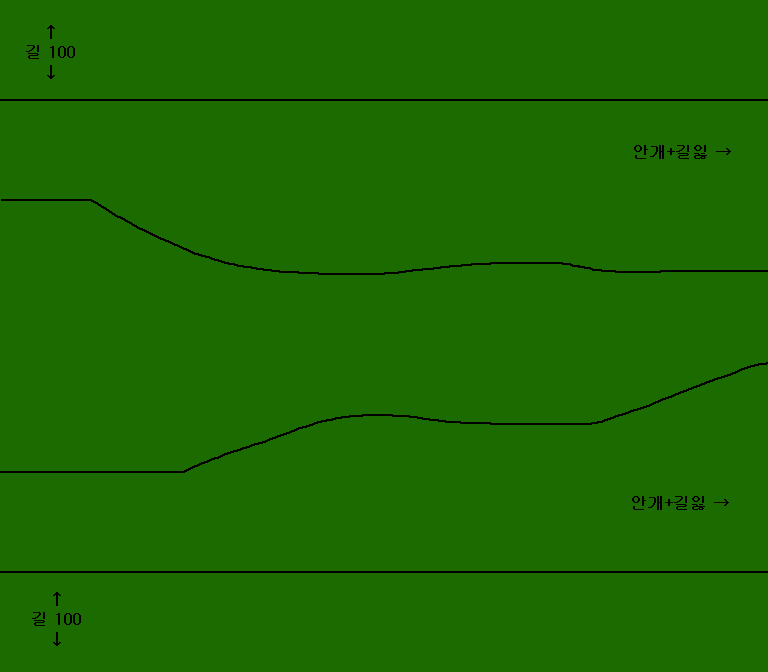
<style>
.page{position:relative;width:768px;height:672px;background:#1c6b00}
.page>*{position:absolute;margin:0}
.t1{font:16px "Gulim";color:#000000;font-weight:bold}
</style>
<div class="page">
<p class="t1" style="left:634px;top:145px;width:97px;height:14px">안개+길잃 →</p>
<p class="t1" style="left:632px;top:496px;width:97px;height:14px">안개+길잃 →</p>
</div>
